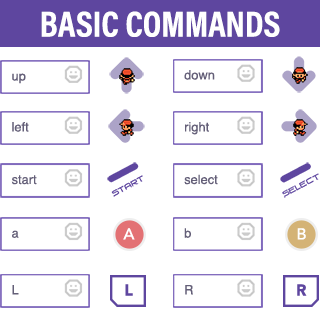
<style>
.page{position:relative;width:320px;height:317px;background:#ffffff}
.page>*{position:absolute;margin:0}
.t1{font:36.3px "AcuminProCond-Bold";color:#ffffff;text-transform:uppercase}
.t2{font:12.9px "Helvetica";color:#645f78}
.t3{font:15.8px "Avenir-Medium";color:#ffffff}
.t4{font:15.8px "Avenir-Black";color:#5e469f}
</style>
<div class="page">
<p class="t1" style="left:41px;top:11px;width:239px;height:26px">Basic Commands</p>
<p class="t2" style="left:12px;top:73px;width:14px;height:11px">up</p>
<p class="t2" style="left:184px;top:70px;width:31px;height:10px">down</p>
<p class="t2" style="left:12px;top:122px;width:17px;height:10px">left</p>
<p class="t2" style="left:185px;top:122px;width:24px;height:13px">right</p>
<p class="t2" style="left:184px;top:174px;width:34px;height:11px">select</p>
<p class="t2" style="left:11px;top:175px;width:26px;height:10px">start</p>
<p class="t2" style="left:12px;top:230px;width:7px;height:8px">a</p>
<p class="t3" style="left:123px;top:228px;width:12px;height:12px">A</p>
<p class="t2" style="left:184px;top:228px;width:7px;height:10px">b</p>
<p class="t3" style="left:297px;top:228px;width:9px;height:12px">B</p>
<p class="t2" style="left:12px;top:285px;width:7px;height:10px">L</p>
<p class="t4" style="left:125px;top:284px;width:8px;height:12px">L</p>
<p class="t2" style="left:185px;top:285px;width:8px;height:10px">R</p>
<p class="t4" style="left:297px;top:284px;width:10px;height:12px">R</p>
</div>
